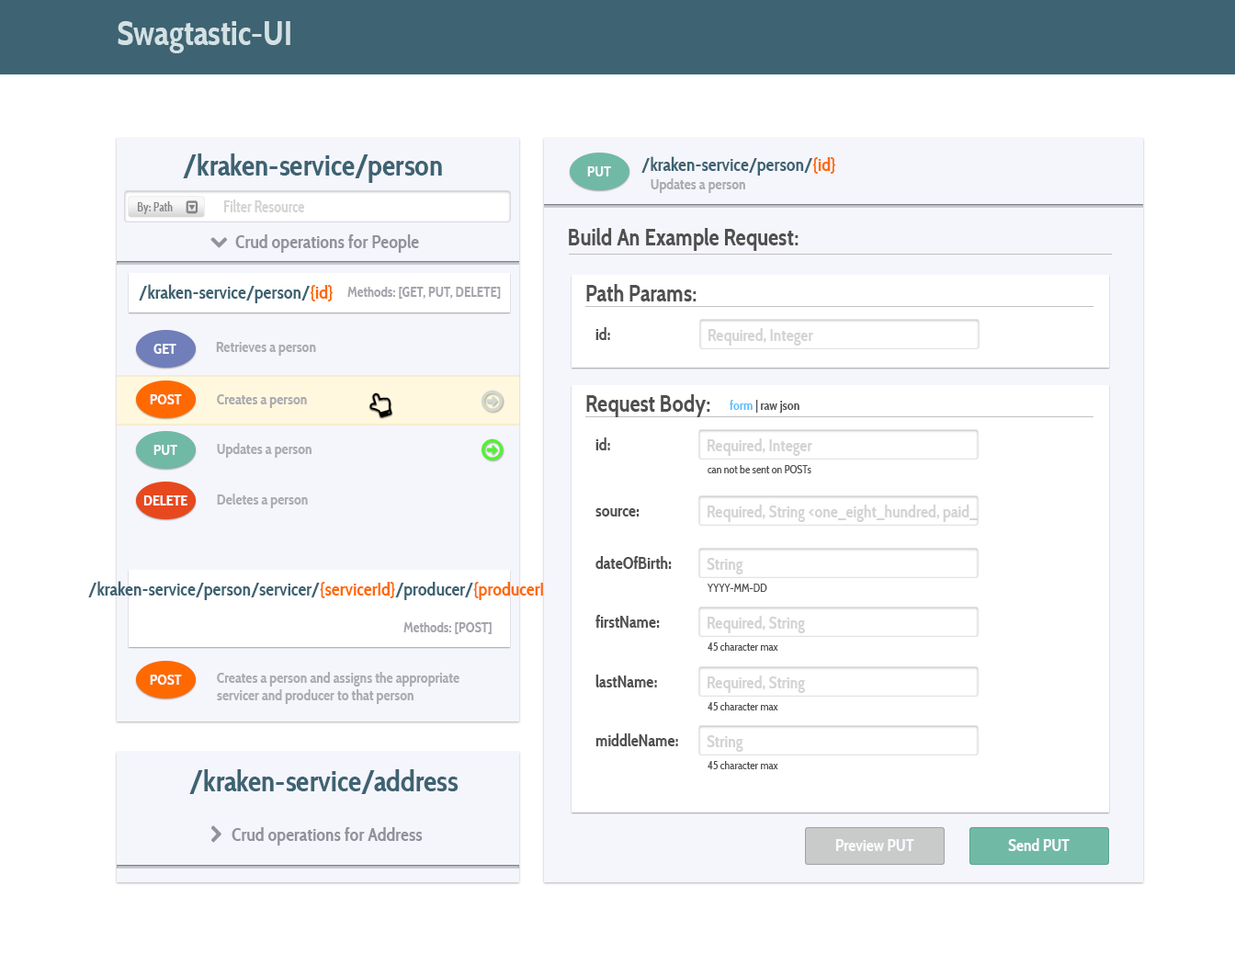
<style>
.page{position:relative;width:1235px;height:965px;background:#ffffff}
.page>*{position:absolute;margin:0}
.t1{font:34px "CabinCondensed-Bold";color:#d3e1e4}
.t2{font:29.4px "CabinCondensed-Bold";color:#3e6372}
.t3{font:18.4px "CabinCondensed-Bold";color:#3e6372}
.t4{font:18.4px "CabinCondensed-Bold";color:#ff6900}
.t5{font:14.7px "CabinCondensed-Bold";color:#fafaff}
.t6{font:14.7px "CabinCondensed-Bold";color:#ababb2}
.t7{font:12.9px "CabinCondensed-Bold";color:#858484;scale:0.89 1}
.t8{font:16.5px "CabinCondensed-Bold";color:#d6d3d3;scale:0.89 1}
.t9{font:23px "CabinCondensed-Bold";color:#505050}
.t10{font:18.4px "CabinCondensed-Bold";color:#92929a}
.t11{font:13.8px "CabinCondensed-Bold";color:#a4a4ac}
.t12{font:16.5px "CabinCondensed-Bold";color:#505050}
.t13{font:16.5px "CabinCondensed-Bold";color:#d5d4d4}
.t14{font:12.9px "CabinCondensed-Bold";color:#505050}
.t15{font:12.9px "CabinCondensed-Bold";color:#5abdfc}
.t16{font:11px "CabinCondensed";color:#505050}
.t17{font:16.5px "CabinCondensed-Bold";color:#fafaff}
</style>
<div class="page">
<p class="t1" style="left:118px;top:21px;width:172px;height:32px">Swagtastic-UI</p>
<p class="t2" style="left:183px;top:154px;width:259px;height:29px">/kraken-service/person</p>
<p class="t3" style="left:642px;top:156px;width:194px;height:20px">/kraken-service/person/<span class="t4">{id}</span></p>
<p class="t5" style="left:587px;top:166px;width:24px;height:10px">PUT</p>
<p class="t6" style="left:651px;top:178px;width:94px;height:15px">Updates a person</p>
<p class="t7" style="left:137px;top:201px;width:36px;height:13px">By: Path</p>
<p class="t8" style="left:223px;top:199px;width:82px;height:13px">Filter Resource</p>
<p class="t9" style="left:569px;top:228px;width:230px;height:23px">Build An Example Request:</p>
<p class="t10" style="left:235px;top:234px;width:184px;height:19px">Crud operations for People</p>
<p class="t3" style="left:139px;top:284px;width:195px;height:19px">/kraken-service/person/<span class="t4">{id}</span></p>
<p class="t11" style="left:347px;top:287px;width:154px;height:12px">Methods: [GET, PUT, DELETE]</p>
<p class="t9" style="left:586px;top:284px;width:111px;height:18px">Path Params:</p>
<p class="t12" style="left:596px;top:327px;width:14px;height:13px">id:</p>
<p class="t13" style="left:709px;top:328px;width:105px;height:18px">Required, Integer</p>
<p class="t6" style="left:216px;top:342px;width:100px;height:14px">Retrieves a person</p>
<p class="t5" style="left:154px;top:344px;width:22px;height:10px">GET</p>
<p class="t5" style="left:150px;top:394px;width:32px;height:10px">POST</p>
<p class="t6" style="left:217px;top:394px;width:90px;height:14px">Creates a person</p>
<p class="t9" style="left:586px;top:394px;width:125px;height:23px">Request Body:</p>
<p class="t14" style="left:730px;top:400px;width:70px;height:13px"><span class="t15">form</span> | raw json</p>
<p class="t12" style="left:596px;top:438px;width:14px;height:12px">id:</p>
<p class="t5" style="left:154px;top:445px;width:23px;height:10px">PUT</p>
<p class="t6" style="left:217px;top:443px;width:95px;height:15px">Updates a person</p>
<p class="t13" style="left:708px;top:438px;width:105px;height:18px">Required, Integer</p>
<p class="t16" style="left:708px;top:465px;width:104px;height:8px">can not be sent on POSTs</p>
<p class="t5" style="left:143px;top:495px;width:45px;height:11px">DELETE</p>
<p class="t6" style="left:217px;top:494px;width:91px;height:14px">Deletes a person</p>
<p class="t12" style="left:596px;top:508px;width:44px;height:9px">source:</p>
<p class="t13" style="left:708px;top:505px;width:270px;height:17px">Required, String &lt;one_eight_hundred, paid_</p>
<p class="t12" style="left:596px;top:556px;width:76px;height:13px">dateOfBirth:</p>
<p class="t13" style="left:707px;top:558px;width:37px;height:17px">String</p>
<p class="t3" style="left:88px;top:581px;width:470px;height:19px">/kraken-service/person/servicer/<span class="t4">{servicerId}</span>/producer/<span class="t4">{producerId}</span></p>
<p class="t16" style="left:707px;top:584px;width:61px;height:8px">YYYY-MM-DD</p>
<p class="t12" style="left:596px;top:615px;width:64px;height:13px">firstName:</p>
<p class="t13" style="left:708px;top:616px;width:97px;height:17px">Required, String</p>
<p class="t11" style="left:404px;top:622px;width:88px;height:12px">Methods: [POST]</p>
<p class="t16" style="left:708px;top:643px;width:71px;height:8px">45 character max</p>
<p class="t5" style="left:150px;top:675px;width:32px;height:10px">POST</p>
<p class="t6" style="left:217px;top:672px;width:243px;height:32px">Creates a person and assigns the appropriate <br>servicer and producer to that person</p>
<p class="t12" style="left:596px;top:675px;width:61px;height:13px">lastName:</p>
<p class="t13" style="left:708px;top:676px;width:97px;height:17px">Required, String</p>
<p class="t16" style="left:708px;top:702px;width:71px;height:9px">45 character max</p>
<p class="t12" style="left:596px;top:734px;width:82px;height:12px">middleName:</p>
<p class="t13" style="left:707px;top:735px;width:37px;height:17px">String</p>
<p class="t16" style="left:708px;top:761px;width:71px;height:8px">45 character max</p>
<p class="t2" style="left:189px;top:769px;width:270px;height:25px">/kraken-service/address</p>
<p class="t10" style="left:232px;top:827px;width:191px;height:19px">Crud operations for Address</p>
<p class="t17" style="left:836px;top:839px;width:79px;height:12px">Preview PUT</p>
<p class="t17" style="left:1008px;top:838px;width:62px;height:13px">Send PUT</p>
</div>
